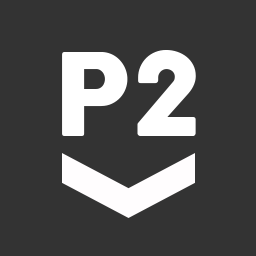
<style>
.page{position:relative;width:256px;height:256px;background:#333333}
.page>*{position:absolute;margin:0}
.t1{font:113.4px "COCOGOOSE";color:#ffffff}
</style>
<div class="page">
<p class="t1" style="left:62px;top:50px;width:134px;height:86px">P2</p>
</div>
